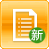
<style>
.page{position:relative;width:49px;height:49px}
.page>*{position:absolute;margin:0}
.t1{font:12px "FZY3JW--GB1-0";color:#ffffff}
</style>
<div class="page">
<p class="t1" style="left:31px;top:29px;width:12px;height:12px">新</p>
</div>
